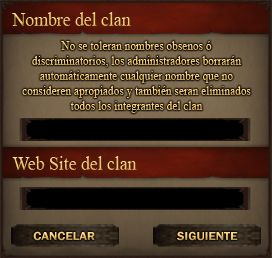
<style>
.page{position:relative;width:272px;height:258px}
.page>*{position:absolute;margin:0}
.t1{font:20.2px "TimesNewRomanPSMT";scale:0.87 1}
.t2{font:12.5px "TimesNewRomanPSMT";scale:0.91 1}
.t3{font:12px "FranklinGothic-Demi";scale:1.07 1}
</style>
<div class="page">
<p class="t1" style="left:12px;top:12px;width:119px;height:14px">Nombre del clan</p>
<p class="t2" style="left:22px;top:41px;width:229px;height:72px;text-align:center">No se toleran nombres obsenos ó<br>discriminatorios, los administradores borrarán<br>automáticamente cualquier nombre que no<br>consideren apropiados y también seran eliminados<br>todos los integrantes del clan</p>
<p class="t1" style="left:12px;top:156px;width:125px;height:14px">Web Site del clan</p>
<p class="t3" style="left:33px;top:231px;width:62px;height:10px">CANCELAR</p>
<p class="t3" style="left:177px;top:231px;width:61px;height:10px">SIGUIENTE</p>
</div>
